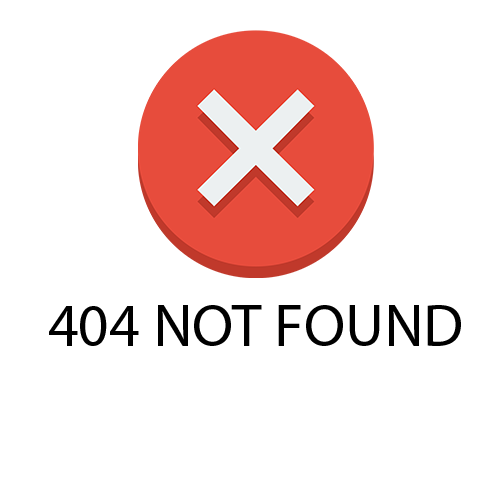
<style>
.page{position:relative;width:500px;height:500px;background:#ffffff}
.page>*{position:absolute;margin:0}
.t1{font:60px "MyriadPro-Regular";color:#000000}
</style>
<div class="page">
<p class="t1" style="left:49px;top:305px;width:412px;height:41px">404 NOT FOUND</p>
</div>
